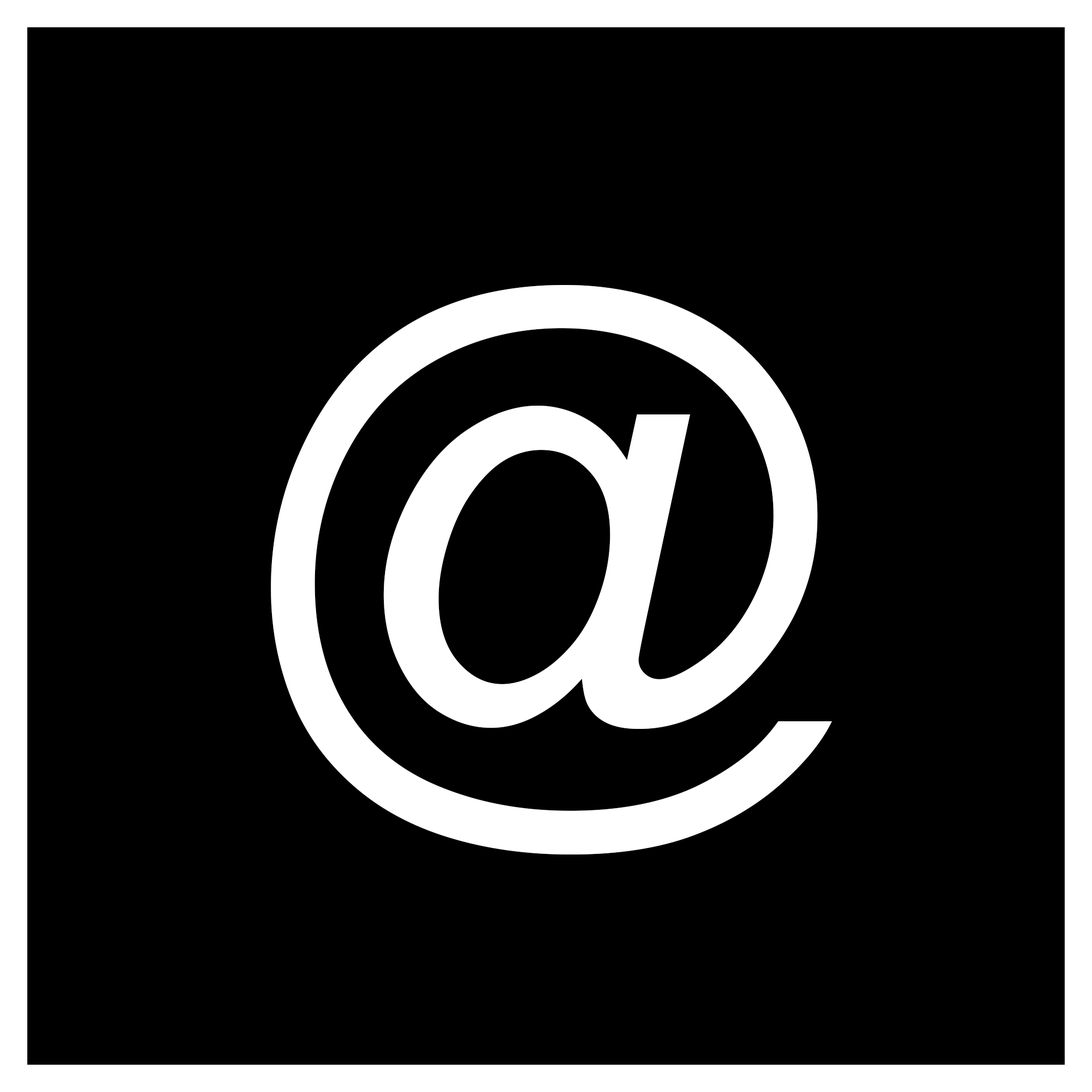
<style>
.page{position:relative;width:1092px;height:1092px;background:#000000}
.page>*{position:absolute;margin:0}
.t1{font:606.7px "ArialMT";color:#ffffff}
</style>
<div class="page">
<p class="t1" style="left:271px;top:285px;width:561px;height:569px">@</p>
</div>
